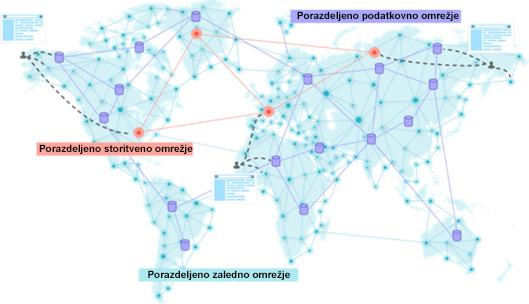
<style>
.page{position:relative;width:529px;height:304px;background:#ffffff}
.page>*{position:absolute;margin:0}
.t1{font:10px "Arial-BoldMT";color:#000101}
</style>
<div class="page">
<p class="t1" style="left:297px;top:11px;width:162px;height:10px">Porazdeljeno podatkovno omrežje</p>
<p class="t1" style="left:39px;top:144px;width:154px;height:10px">Porazdeljeno storitveno omrežje</p>
<p class="t1" style="left:148px;top:270px;width:142px;height:10px">Porazdeljeno zaledno omrežje</p>
</div>
